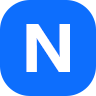
<style>
.page{position:relative;width:96px;height:96px;background:#0d6efd}
.page>*{position:absolute;margin:0}
.t1{font:68.6px "SegoeUI-Bold";color:#ffffff}
</style>
<div class="page">
<p class="t1" style="left:26px;top:24px;width:44px;height:48px">N</p>
</div>
